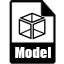
<style>
.page{position:relative;width:64px;height:64px;background:#ffffff}
.page>*{position:absolute;margin:0}
.t1{font:14.5px "Impact";color:#ffffff}
</style>
<div class="page">
<p class="t1" style="left:15px;top:47px;width:36px;height:11px">Model</p>
</div>
